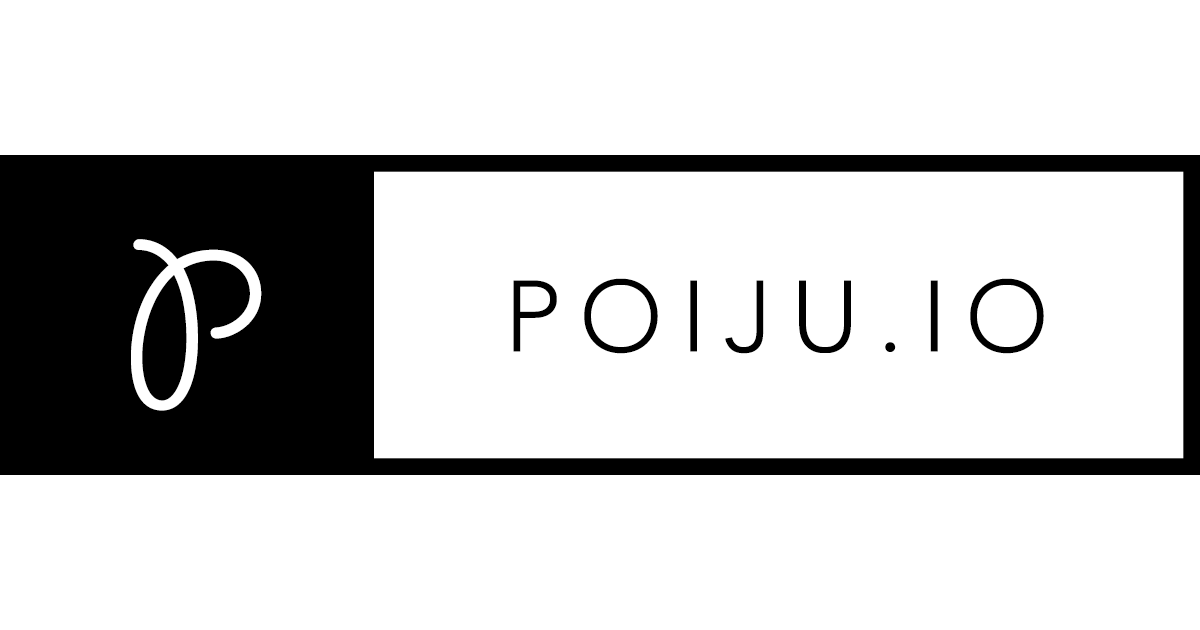
<style>
.page{position:relative;width:1200px;height:630px;background:#ffffff}
.page>*{position:absolute;margin:0}
.t1{font:250px "GiddyupStd";color:#ffffff}
.t2{font:100px "Avenir-Light";letter-spacing:0.18em;color:#000000}
</style>
<div class="page">
<p class="t1" style="left:131px;top:239px;width:131px;height:172px">P</p>
<p class="t2" style="left:513px;top:278px;width:531px;height:76px">POIJU.IO</p>
</div>
